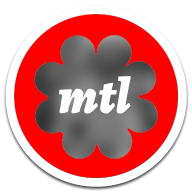
<style>
.page{position:relative;width:192px;height:192px;background:#ffffff}
.page>*{position:absolute;margin:0}
.t1{font:50px "Alegreya-BlackItalic";letter-spacing:0.01em;color:#ffffff}
</style>
<div class="page">
<p class="t1" style="left:59px;top:76px;width:72px;height:38px">mtl</p>
</div>
